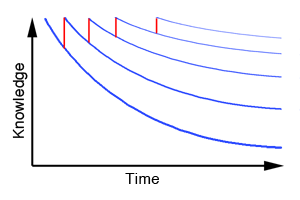
<style>
.page{position:relative;width:300px;height:200px;background:#ffffff}
.page>*{position:absolute;margin:0}
.t1{font:15px "Helvetica";letter-spacing:0.02em;color:#000000}
</style>
<div class="page">
<p class="t1" style="left:12px;top:63px;width:16px;height:75px;rotate:-90deg">Knowledge</p>
<p class="t1" style="left:125px;top:173px;width:34px;height:11px">Time</p>
</div>
